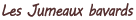
<style>
.page{position:relative;width:136px;height:20px;background:#ffffff}
.page>*{position:absolute;margin:0}
.t1{font:16.3px "MVBoli";letter-spacing:-0.05em;color:#553030;scale:0.89 1}
</style>
<div class="page">
<p class="t1" style="left:2px;top:3px;width:132px;height:14px">Les Jumeaux bavards</p>
</div>
